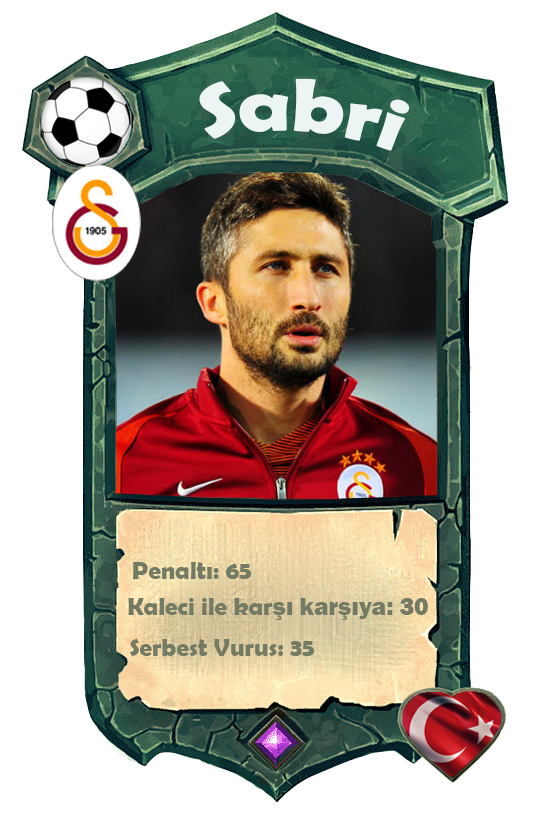
<style>
.page{position:relative;width:558px;height:814px;background:#ffffff}
.page>*{position:absolute;margin:0}
.t1{font:75.7px "BerlinSansFBDemi-Bold";color:#ecf4f4;scale:1.06 1}
.t2{font:25px "BerlinSansFBDemi-Bold";color:#747b65}
.t3{font:25px "FranklinGothic-Heavy";color:#747b65}
</style>
<div class="page">
<p class="t1" style="left:199px;top:78px;width:211px;height:73px;rotate:4deg">Sabri</p>
<p class="t2" style="left:133px;top:562px;width:118px;height:17px">Penaltı: 65</p>
<p class="t2" style="left:128px;top:598px;width:300px;height:22px">Kaleci ile kar<span class="t3">şı karşıya: 30</span></p>
<p class="t2" style="left:130px;top:639px;width:184px;height:17px">Serbest Vurus: 35</p>
</div>
